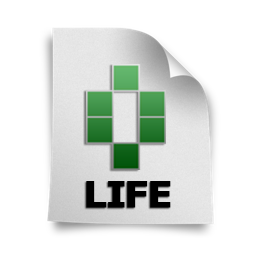
<style>
.page{position:relative;width:256px;height:256px;background:#ffffff}
.page>*{position:absolute;margin:0}
.t1{font:36px "Verdana-Bold";letter-spacing:-0.05em;color:#000000;font-weight:bold}
</style>
<div class="page">
<p class="t1" style="left:86px;top:181px;width:85px;height:27px">LIFE</p>
</div>
